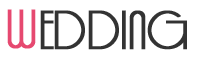
<style>
.page{position:relative;width:200px;height:60px;background:#ffffff}
.page>*{position:absolute;margin:0}
.t1{font:50px "FeenaCasual";color:#e64970;font-weight:bold}
.t2{font:50px "FeenaCasual";color:#333333;font-weight:bold}
</style>
<div class="page">
<p class="t1" style="left:7px;top:9px;width:29px;height:40px">W</p>
<p class="t2" style="left:40px;top:10px;width:147px;height:40px">EDDING</p>
</div>
